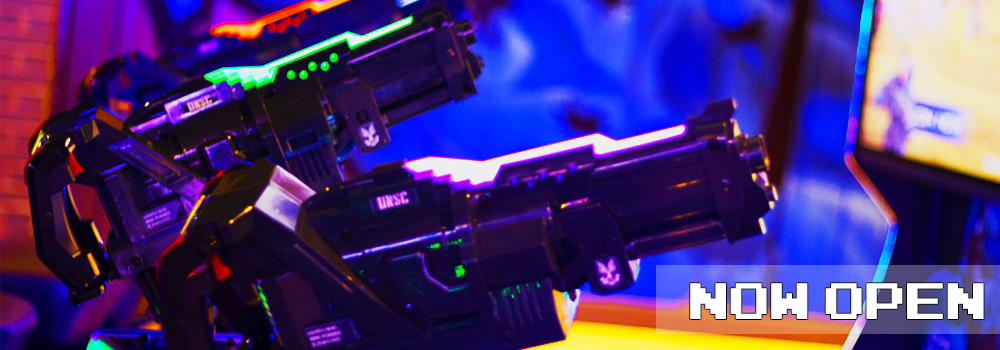
<style>
.page{position:relative;width:1000px;height:350px}
.page>*{position:absolute;margin:0}
.t1{font:40.6px "PressStart2P";color:#ffffff;text-transform:uppercase}
</style>
<div class="page">
<p class="t1" style="left:690px;top:283px;width:294px;height:36px">Now open</p>
</div>
